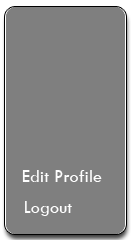
<style>
.page{position:relative;width:133px;height:240px;background:#7f7f7f}
.page>*{position:absolute;margin:0}
.t1{font:18.4px "TwCenMT-Regular";color:#fefefe}
</style>
<div class="page">
<p class="t1" style="left:22px;top:170px;width:80px;height:12px">Edit Profile</p>
<p class="t1" style="left:25px;top:201px;width:47px;height:15px">Logout</p>
</div>
